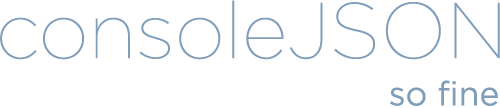
<style>
.page{position:relative;width:500px;height:108px;background:#ffffff}
.page>*{position:absolute;margin:0}
.t1{font:78.9px "Gotham-Thin";color:#809eba}
.t2{font:33.8px "Gotham-Book";color:#809eba}
</style>
<div class="page">
<p class="t1" style="left:0px;top:0px;width:500px;height:60px">consoleJSON</p>
<p class="t2" style="left:390px;top:80px;width:108px;height:26px">so fine</p>
</div>
